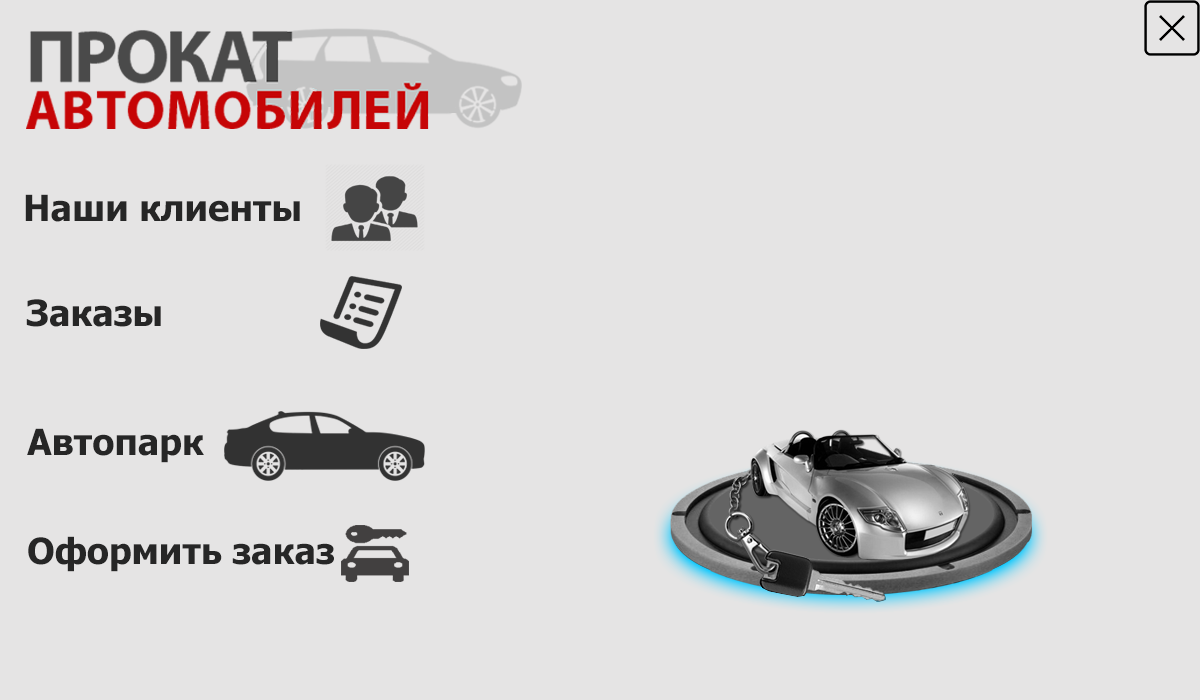
<style>
.page{position:relative;width:1200px;height:700px;background:#e5e4e4}
.page>*{position:absolute;margin:0}
.t1{font:36px "Tahoma-Bold";color:#262626}
</style>
<div class="page">
<p class="t1" style="left:25px;top:194px;width:275px;height:28px">Наши клиенты</p>
<p class="t1" style="left:26px;top:299px;width:135px;height:28px">Заказы</p>
<p class="t1" style="left:27px;top:428px;width:177px;height:35px">Автопарк</p>
<p class="t1" style="left:28px;top:536px;width:306px;height:36px">Оформить заказ</p>
</div>
